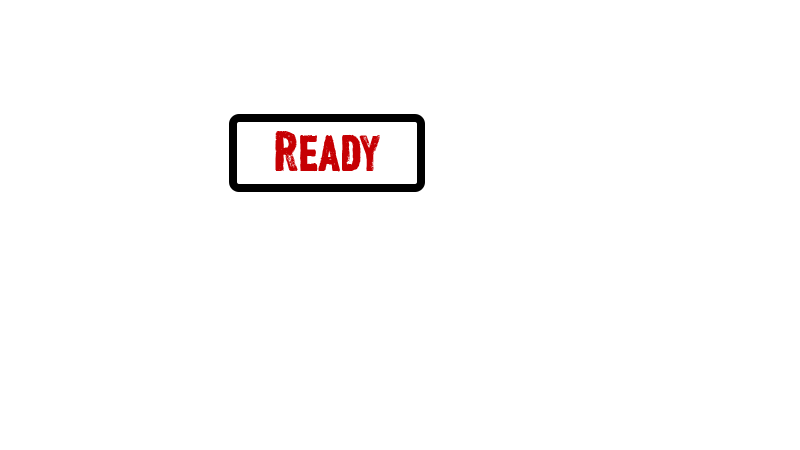
<style>
.page{position:relative;width:800px;height:450px;background:#ffffff}
.page>*{position:absolute;margin:0}
.t1{font:60px "CFJacquesParizeau-Regular";color:#c60003}
</style>
<div class="page">
<p class="t1" style="left:275px;top:131px;width:105px;height:41px">Ready</p>
</div>
